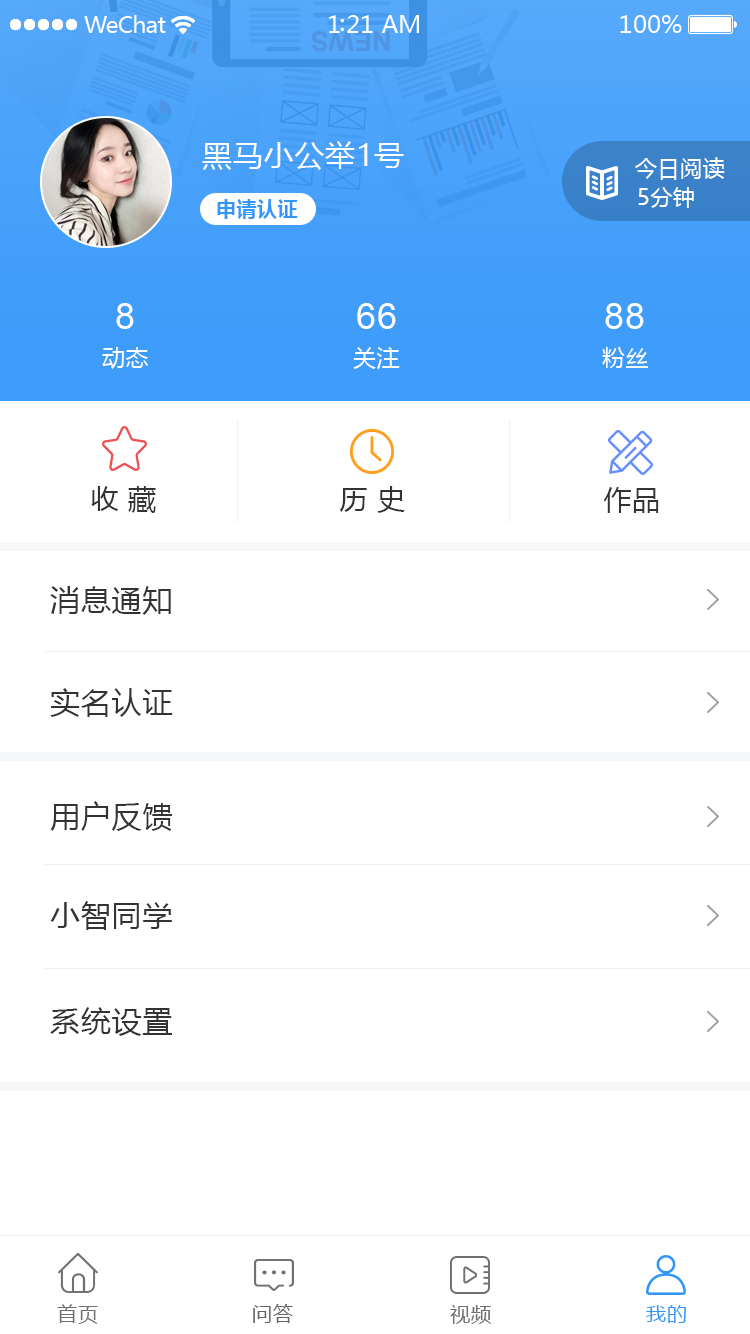
<style>
.page{position:relative;width:750px;height:1334px;background:#ffffff}
.page>*{position:absolute;margin:0}
.t1{font:30px "MicrosoftYaHei";letter-spacing:0.025em;color:#ffffff}
.t2{font:22px "MicrosoftYaHei";letter-spacing:0.025em;color:#ffffff}
.t3{font:20px "MicrosoftYaHei-Bold";letter-spacing:0.025em;color:#3296fa}
.t4{font:36px "ArialMT";letter-spacing:0.025em;color:#ffffff}
.t5{font:23px "MicrosoftYaHei";letter-spacing:0.025em;color:#ffffff}
.t6{font:28px "MicrosoftYaHei";letter-spacing:0.025em;color:#333333}
.t7{font:30px "MicrosoftYaHei";letter-spacing:0.025em;color:#333333}
.t8{font:20px "MicrosoftYaHei";letter-spacing:0.05em;color:#707070}
.t9{font:20px "MicrosoftYaHei";letter-spacing:0.05em;color:#666666}
.t10{font:20px "MicrosoftYaHei";letter-spacing:0.05em;color:#3296fa}
</style>
<div class="page">
<p class="t1" style="left:202px;top:141px;width:202px;height:29px">黑马小公举1号</p>
<p class="t2" style="left:635px;top:157px;width:90px;height:23px">今日阅读</p>
<p class="t2" style="left:638px;top:187px;width:56px;height:21px">5分钟</p>
<p class="t3" style="left:217px;top:199px;width:81px;height:20px">申请认证</p>
<p class="t4" style="left:116px;top:303px;width:18px;height:26px">8</p>
<p class="t4" style="left:357px;top:303px;width:39px;height:26px">66</p>
<p class="t4" style="left:605px;top:303px;width:39px;height:26px">88</p>
<p class="t5" style="left:102px;top:347px;width:46px;height:22px">动态</p>
<p class="t5" style="left:353px;top:347px;width:47px;height:22px">关注</p>
<p class="t5" style="left:602px;top:347px;width:46px;height:21px">粉丝</p>
<p class="t6" style="left:91px;top:486px;width:65px;height:27px">收 藏</p>
<p class="t6" style="left:339px;top:486px;width:66px;height:27px">历 史</p>
<p class="t6" style="left:604px;top:487px;width:55px;height:26px">作品</p>
<p class="t7" style="left:50px;top:586px;width:121px;height:29px">消息通知</p>
<p class="t7" style="left:50px;top:688px;width:123px;height:29px">实名认证</p>
<p class="t7" style="left:50px;top:801px;width:122px;height:30px">用户反馈</p>
<p class="t7" style="left:50px;top:901px;width:122px;height:29px">小智同学</p>
<p class="t7" style="left:50px;top:1007px;width:122px;height:29px">系统设置</p>
<p class="t8" style="left:57px;top:1304px;width:41px;height:20px">首页</p>
<p class="t9" style="left:253px;top:1304px;width:40px;height:19px">问答</p>
<p class="t8" style="left:450px;top:1305px;width:41px;height:19px">视频</p>
<p class="t10" style="left:646px;top:1305px;width:40px;height:18px">我的</p>
</div>
